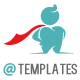
<style>
.page{position:relative;width:80px;height:80px;background:#ffffff}
.page>*{position:absolute;margin:0}
.t1{font:14.9px "Kenzo";letter-spacing:0.025em;color:#6a6a6a}
</style>
<div class="page">
<p class="t1" style="left:18px;top:63px;width:59px;height:12px">Templates</p>
</div>
